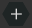
<style>
.page{position:relative;width:32px;height:28px;background:#1f2525}
.page>*{position:absolute;margin:0}
.t1{font:18px "LucidaSansUnicode";color:#dcdcdc}
</style>
<div class="page">
<p class="t1" style="left:11px;top:8px;width:11px;height:12px">+</p>
</div>
